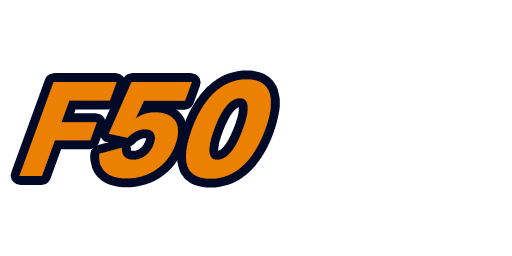
<style>
.page{position:relative;width:512px;height:256px;background:#ffffff}
.page>*{position:absolute;margin:0}
.t1{font:128px "RodinPro-EB";letter-spacing:0.001em;color:#ec8002;scale:0.94 1}
</style>
<div class="page">
<p class="t1" style="left:19px;top:79px;width:252px;height:100px">F50</p>
</div>
